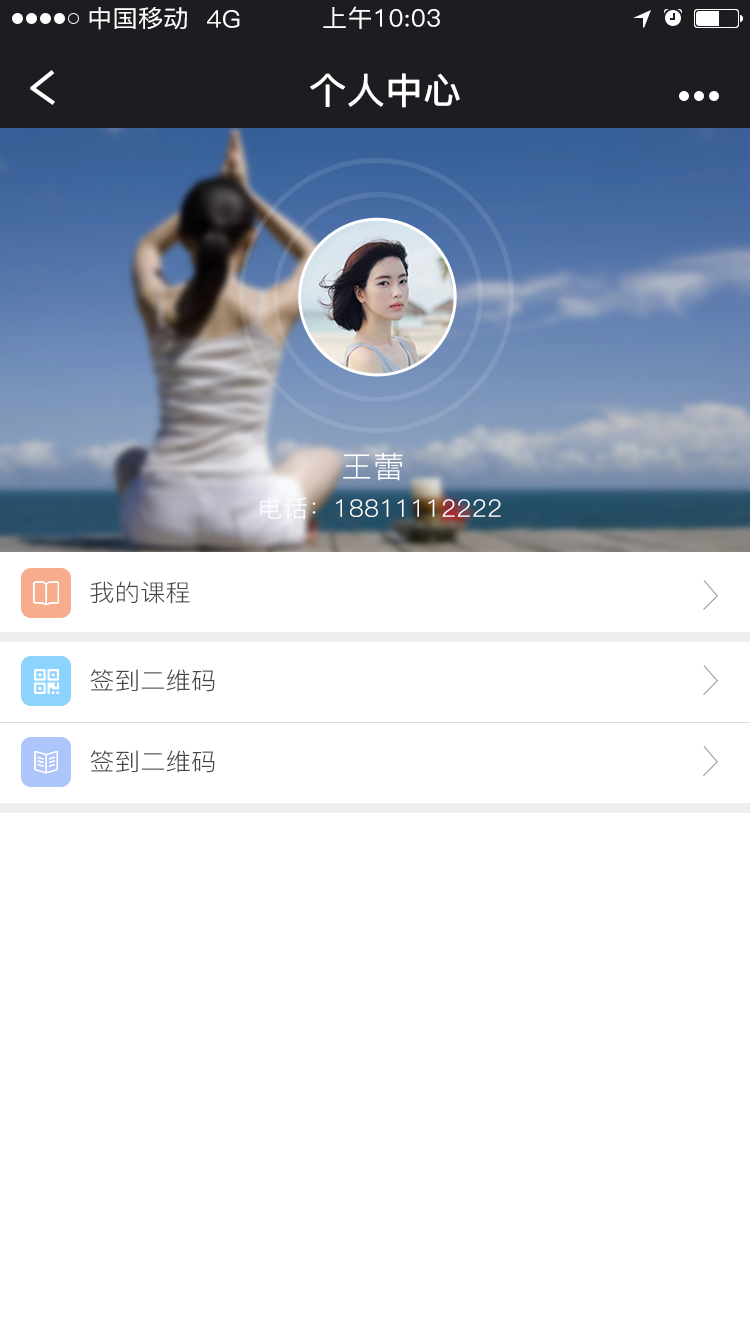
<style>
.page{position:relative;width:750px;height:1334px;background:#ffffff}
.page>*{position:absolute;margin:0}
.t1{font:24px "PingFang-SC-Medium";letter-spacing:0.01em;color:#ffffff;scale:1.05 1}
.t2{font:36px "PingFang-SC-Bold";letter-spacing:0.01em;color:#ffffff;scale:1.05 1}
.t3{font:30px "PingFang-SC-Regular";letter-spacing:0.01em;color:#ffffff;scale:1.05 1}
.t4{font:24px "PingFang-SC-Regular";letter-spacing:0.01em;color:#ffffff;scale:1.05 1}
.t5{font:24px "PingFang-SC-Regular";letter-spacing:0.01em;color:#474747;scale:1.05 1}
</style>
<div class="page">
<p class="t1" style="left:323px;top:6px;width:117px;height:23px">上午10:03</p>
<p class="t1" style="left:89px;top:7px;width:98px;height:23px">中国移动</p>
<p class="t1" style="left:207px;top:10px;width:33px;height:18px">4G</p>
<p class="t2" style="left:310px;top:73px;width:150px;height:35px">个人中心</p>
<p class="t3" style="left:343px;top:452px;width:60px;height:29px">王蕾</p>
<p class="t4" style="left:260px;top:497px;width:241px;height:22px">电话：18811112222</p>
<p class="t5" style="left:90px;top:581px;width:100px;height:23px">我的课程</p>
<p class="t5" style="left:90px;top:669px;width:125px;height:23px">签到二维码</p>
<p class="t5" style="left:90px;top:750px;width:125px;height:23px">签到二维码</p>
</div>
